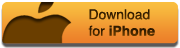
<style>
.page{position:relative;width:180px;height:48px}
.page>*{position:absolute;margin:0}
.t1{font:13.7px "Helvetica";color:#3c2200}
.t2{font:13.7px "Helvetica-Bold";color:#3c2200}
</style>
<div class="page">
<p class="t1" style="left:88px;top:9px;width:67px;height:27px">Download<br>for<span class="t2"> iPhone</span></p>
</div>
